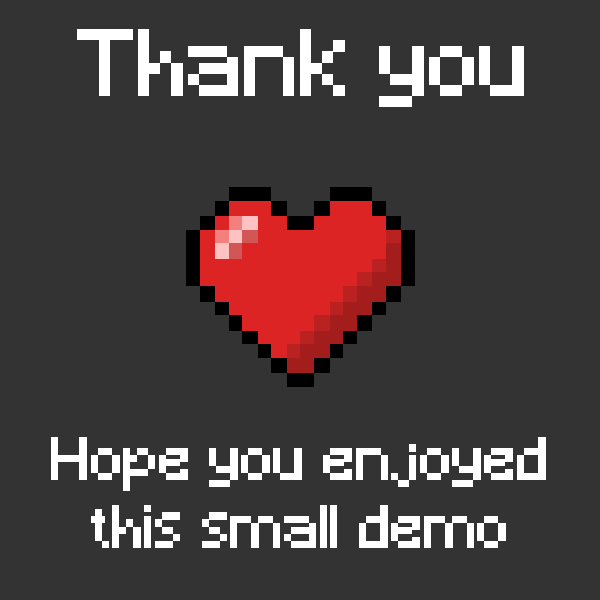
<style>
.page{position:relative;width:600px;height:600px;background:#333333}
.page>*{position:absolute;margin:0}
.t1{font:89.5px "Minecraft";color:#ffffff}
.t2{font:57.3px "Minecraft";color:#ffffff}
</style>
<div class="page">
<p class="t1" style="left:77px;top:29px;width:447px;height:78px">Thank you</p>
<p class="t2" style="left:51px;top:437px;width:495px;height:111px;text-align:center">Hope you enjoyed this small demo</p>
</div>
